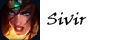
<style>
.page{position:relative;width:140px;height:40px;background:#ffffff}
.page>*{position:absolute;margin:0}
.t1{font:12px "VinerHandITC";color:#000000}
</style>
<div class="page">
<p class="t1" style="left:47px;top:12px;width:40px;height:14px">Sivir</p>
</div>
